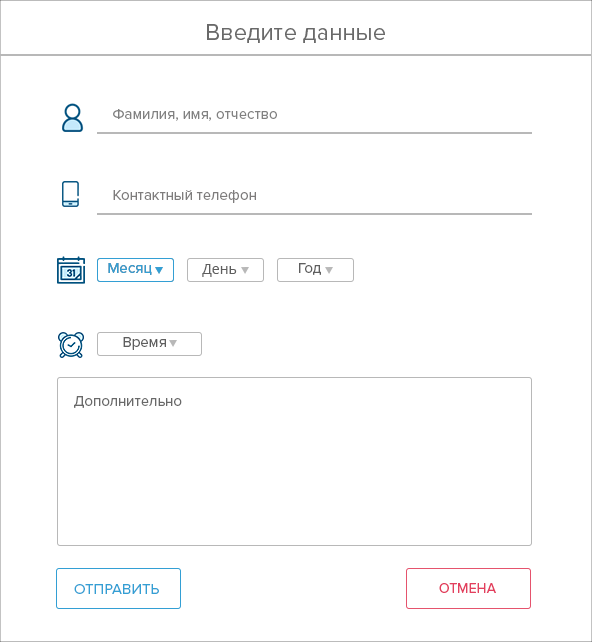
<style>
.page{position:relative;width:592px;height:642px;background:#ffffff}
.page>*{position:absolute;margin:0}
.t1{font:24px "ProximaNova-Regular";color:#696969}
.t2{font:15px "ProximaNova-Regular";color:#818181}
.t3{font:15px "ProximaNova-Regular";color:#7e7c7c}
.t4{font:15px "ProximaNova-Regular";color:#339fd4}
.t5{font:14px "OpenSans";color:#5e5e5e}
.t6{font:15px "ProximaNova-Regular";color:#5e5e5e}
.t7{font:15px "ProximaNova-Regular";color:#696969}
.t8{font:15px "ProximaNova-Regular";color:#339fd4;text-transform:uppercase}
.t9{font:14px "ProximaNova-Regular";color:#e33f5e;text-transform:uppercase}
</style>
<div class="page">
<p class="t1" style="left:207px;top:24px;width:178px;height:19px">Введите данные</p>
<p class="t2" style="left:113px;top:109px;width:164px;height:12px">Фамилия, имя, отчество</p>
<p class="t3" style="left:113px;top:190px;width:143px;height:13px">Контактный телефон</p>
<p class="t4" style="left:108px;top:263px;width:44px;height:12px">Месяц</p>
<p class="t4" style="left:108px;top:263px;width:44px;height:12px">Месяц</p>
<p class="t5" style="left:202px;top:264px;width:35px;height:13px">День</p>
<p class="t6" style="left:299px;top:263px;width:22px;height:12px">Год</p>
<p class="t6" style="left:123px;top:337px;width:43px;height:13px">Время</p>
<p class="t7" style="left:74px;top:396px;width:108px;height:12px">Дополнительно</p>
<p class="t8" style="left:74px;top:584px;width:85px;height:10px">отправить</p>
<p class="t9" style="left:439px;top:583px;width:57px;height:10px">отмена</p>
</div>
